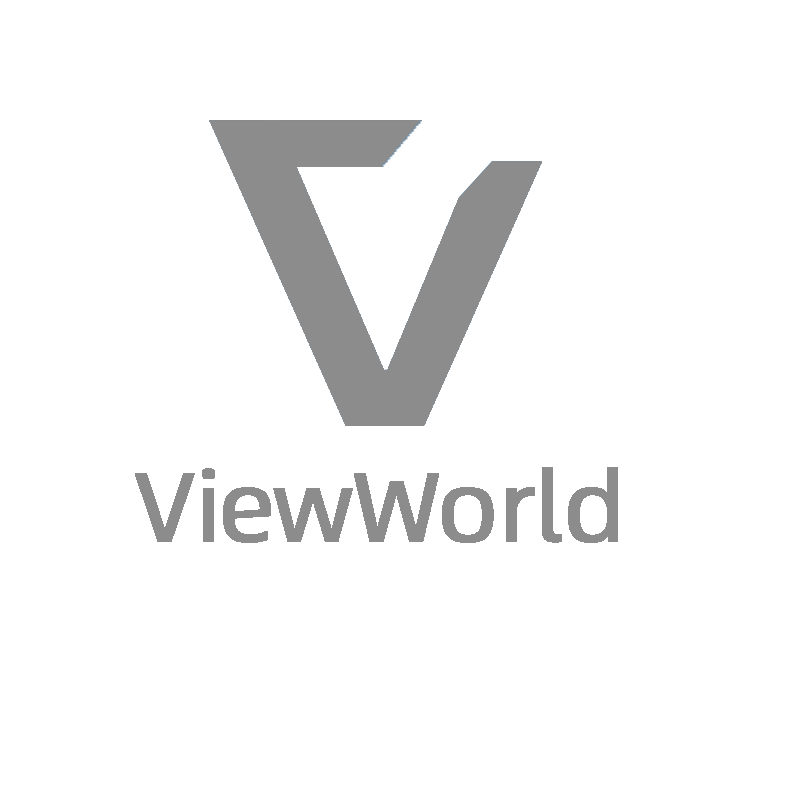
<style>
.page{position:relative;width:800px;height:800px;background:#ffffff}
.page>*{position:absolute;margin:0}
.t1{font:97.5px "AlibabaPuHuiTi_2_55_Regular";letter-spacing:-0.08em;color:#8c8c8c;font-weight:bold}
</style>
<div class="page">
<p class="t1" style="left:135px;top:467px;width:483px;height:76px">ViewWorld</p>
</div>
